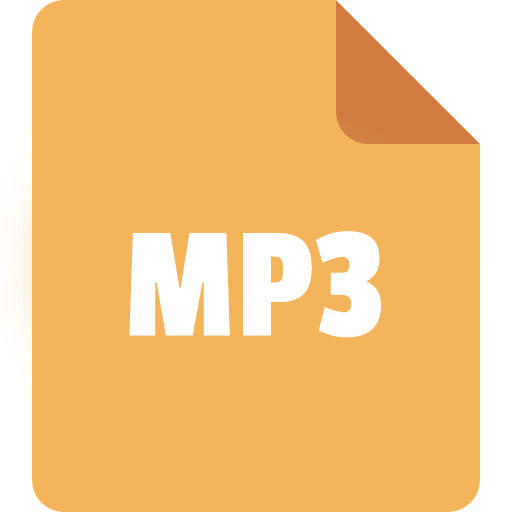
<style>
.page{position:relative;width:512px;height:512px;background:#f4b459}
.page>*{position:absolute;margin:0}
.t1{font:165px "PassionOne-Regular";color:#ffffff}
</style>
<div class="page">
<p class="t1" style="left:129px;top:231px;width:252px;height:107px">MP3</p>
</div>
